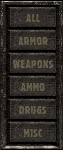
<style>
.page{position:relative;width:63px;height:150px}
.page>*{position:absolute;margin:0}
.t1{font:10px "FalloutDecayed";letter-spacing:0.05em;color:#67614c}
.t2{font:10px "FalloutDecayed";letter-spacing:0.05em;color:#67614c;text-transform:uppercase}
.t3{font:10px "FalloutDecayed";letter-spacing:0.025em;color:#67614c;text-transform:uppercase}
</style>
<div class="page">
<p class="t1" style="left:26px;top:14px;width:14px;height:8px">ALL</p>
<p class="t2" style="left:18px;top:37px;width:30px;height:8px">ARMOR</p>
<p class="t2" style="left:13px;top:60px;width:40px;height:8px">WEAPONS</p>
<p class="t3" style="left:21px;top:83px;width:24px;height:8px">AMMO</p>
<p class="t2" style="left:19px;top:106px;width:28px;height:8px">DRUGS</p>
<p class="t2" style="left:23px;top:129px;width:19px;height:8px">MISC</p>
</div>
